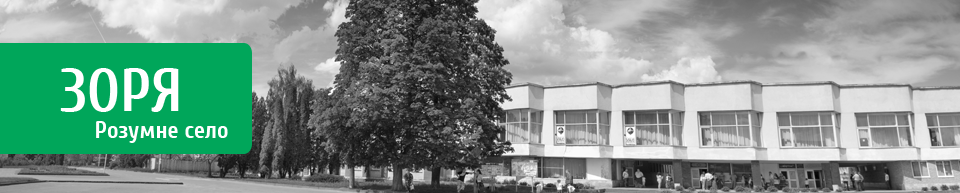
<style>
.page{position:relative;width:960px;height:193px}
.page>*{position:absolute;margin:0}
.t1{font:60px "Cuprum-Bold";color:#ffffff}
.t2{font:24px "Cuprum-Bold";color:#ffffff}
</style>
<div class="page">
<p class="t1" style="left:60px;top:68px;width:119px;height:44px">ЗОРЯ</p>
<p class="t2" style="left:96px;top:121px;width:132px;height:22px">Розумне село</p>
</div>
